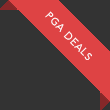
<style>
.page{position:relative;width:110px;height:110px;background:#333333}
.page>*{position:absolute;margin:0}
.t1{font:10px "Avenir-Book";letter-spacing:0.1em;color:#ffffff}
</style>
<div class="page">
<p class="t1" style="left:45px;top:11px;width:47px;height:49px;rotate:46deg">PGA DEALS</p>
</div>
